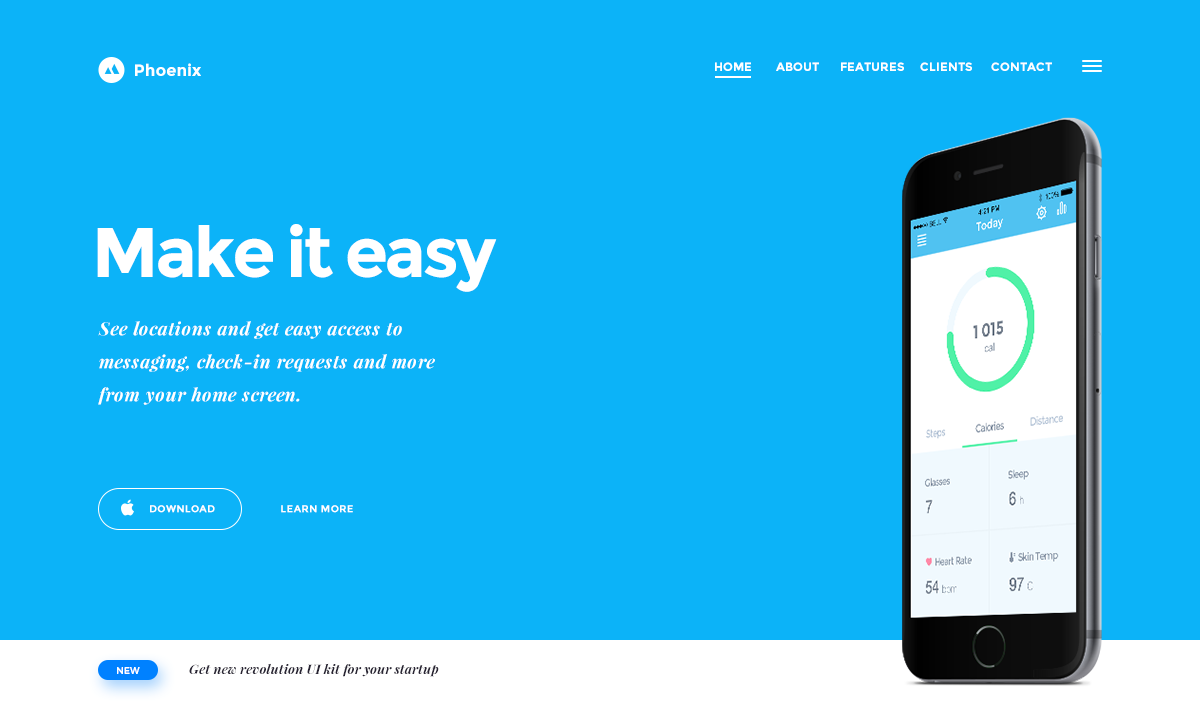
<style>
.page{position:relative;width:1200px;height:703px;background:#0cb3f8}
.page>*{position:absolute;margin:0}
.t1{font:16.4px "Montserrat-Bold";color:#ffffff}
.t2{font:12px "Montserrat-Bold";color:#ffffff;text-transform:uppercase}
.t3{font:70px "Montserrat-Bold";letter-spacing:-0.05em;color:#ffffff}
.t4{font:18px/33px "PlayfairDisplay-BoldItalic";letter-spacing:0.03em;color:#ffffff}
.t5{font:10px "Montserrat-Bold";letter-spacing:0.04em;color:#ffffff;text-transform:uppercase}
.t6{font:13px "PlayfairDisplay-BoldItalic";letter-spacing:0.01em;color:#292534}
.t7{font:9px "Montserrat-Regular";letter-spacing:0.02em;color:#ffffff;text-transform:uppercase}
</style>
<div class="page">
<p class="t1" style="left:135px;top:63px;width:66px;height:13px">Phoenix</p>
<p class="t2" style="left:715px;top:62px;width:337px;height:9px">home        About       Features     Clients      Contact</p>
<p class="t3" style="left:97px;top:224px;width:400px;height:68px">Make it easy</p>
<p class="t4" style="left:98px;top:321px;width:337px;height:84px">See locations and get easy access to messaging, check-in requests and more from your home screen.</p>
<p class="t5" style="left:150px;top:505px;width:65px;height:8px">download</p>
<p class="t5" style="left:281px;top:505px;width:72px;height:8px">Learn more</p>
<p class="t6" style="left:189px;top:663px;width:250px;height:14px">Get new revolution UI kit for your startup</p>
<p class="t7" style="left:117px;top:667px;width:23px;height:7px">New</p>
</div>
